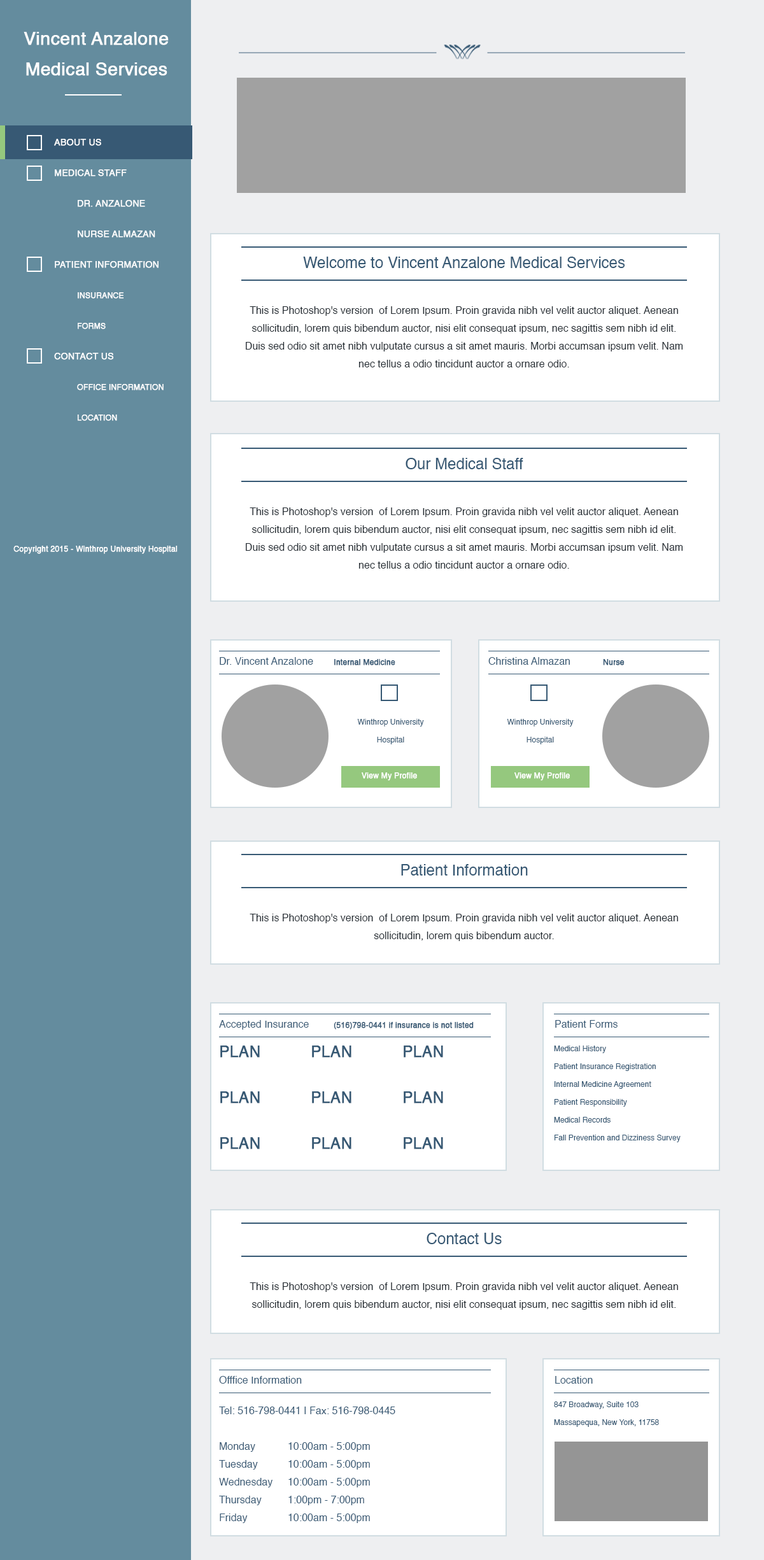
<style>
.page{position:relative;width:764px;height:1560px;background:#ffffff}
.page>*{position:absolute;margin:0}
.t1{font:17.8px/30.6px "Helvetica";color:#ffffff;font-weight:bold}
.t2{font:17.8px/22.9px "Helvetica";color:#ffffff;font-weight:bold}
.t3{font:8.9px/30.6px "Helvetica";color:#ffffff;text-transform:uppercase;font-weight:bold}
.t4{font:7.6px/30.6px "Helvetica";color:#ffffff;text-transform:uppercase;font-weight:bold}
.t5{font:15.3px "Helvetica";color:#375974}
.t6{font:10.2px/17.8px "Helvetica";color:#232b32}
.t7{font:7.6px "Helvetica";color:#ffffff;font-weight:bold}
.t8{font:10.2px "Helvetica";color:#375974}
.t9{font:7.6px "Helvetica";color:#375974;font-weight:bold}
.t10{font:7.6px/17.8px "Helvetica";color:#375974}
.t11{font:15.3px/22.9px "Helvetica";color:#375974;font-weight:bold}
.t12{font:10.2px/17.8px "Helvetica";color:#375974}
</style>
<div class="page">
<p class="t1" style="left:24px;top:32px;width:145px;height:44px;text-align:center"><span class="t2"><br></span>Vincent Anzalone<br>Medical Services</p>
<p class="t3" style="left:54px;top:139px;width:110px;height:282px">About Us<br>Medical Staff<br> Dr. Anzalone<br> Nurse Almazan<br>Patient Information<br> <span class="t4">Insurance<br> Forms<br></span>Contact Us<br> <span class="t4">Office Information<br> Location</span></p>
<p class="t5" style="left:303px;top:257px;width:322px;height:11px">Welcome to Vincent Anzalone Medical Services</p>
<p class="t6" style="left:246px;top:306px;width:437px;height:61px;text-align:center">This is Photoshop's version  of Lorem Ipsum. Proin gravida nibh vel velit auctor aliquet. Aenean sollicitudin, lorem quis bibendum auctor, nisi elit consequat ipsum, nec sagittis sem nibh id elit. Duis sed odio sit amet nibh vulputate cursus a sit amet mauris. Morbi accumsan ipsum velit. Nam nec tellus a odio tincidunt auctor a ornare odio.</p>
<p class="t5" style="left:406px;top:458px;width:117px;height:11px">Our Medical Staff</p>
<p class="t6" style="left:246px;top:508px;width:437px;height:61px;text-align:center">This is Photoshop's version  of Lorem Ipsum. Proin gravida nibh vel velit auctor aliquet. Aenean sollicitudin, lorem quis bibendum auctor, nisi elit consequat ipsum, nec sagittis sem nibh id elit. Duis sed odio sit amet nibh vulputate cursus a sit amet mauris. Morbi accumsan ipsum velit. Nam nec tellus a odio tincidunt auctor a ornare odio.</p>
<p class="t7" style="left:13px;top:546px;width:165px;height:8px">Copyright 2015 - Winthrop University Hospital</p>
<p class="t8" style="left:220px;top:657px;width:175px;height:9px">Dr. Vincent Anzalone <span class="t9">Internal Medicine</span></p>
<p class="t8" style="left:488px;top:657px;width:137px;height:9px">Christina Almazan <span class="t9"> Nurse</span></p>
<p class="t10" style="left:357px;top:719px;width:67px;height:25px;text-align:center">Winthrop University <br>Hospital</p>
<p class="t10" style="left:507px;top:719px;width:67px;height:25px;text-align:center">Winthrop University <br>Hospital</p>
<p class="t7" style="left:362px;top:773px;width:55px;height:8px">View My Profile</p>
<p class="t7" style="left:515px;top:773px;width:55px;height:8px">View My Profile</p>
<p class="t5" style="left:401px;top:864px;width:127px;height:12px">Patient Information</p>
<p class="t6" style="left:250px;top:914px;width:428px;height:27px;text-align:center">This is Photoshop's version  of Lorem Ipsum. Proin gravida nibh vel velit auctor aliquet. Aenean sollicitudin, lorem quis bibendum auctor.</p>
<p class="t9" style="left:219px;top:1020px;width:255px;height:10px"><span class="t8">Accepted Insurance  </span>(516)798-0441 if insurance is not listed</p>
<p class="t8" style="left:555px;top:1020px;width:63px;height:8px">Patient Forms</p>
<p class="t11" style="left:220px;top:1046px;width:223px;height:104px">PLAN   PLAN   PLAN <br><br>PLAN   PLAN   PLAN   <br>PLAN   PLAN   PLAN</p>
<p class="t10" style="left:554px;top:1046px;width:127px;height:97px">Medical History<br>Patient Insurance Registration<br>Internal Medicine Agreement<br>Patient Responsibility<br>Medical Records<br>Fall Prevention and Dizziness Survey</p>
<p class="t5" style="left:427px;top:1233px;width:75px;height:11px">Contact Us</p>
<p class="t6" style="left:250px;top:1283px;width:428px;height:27px;text-align:center">This is Photoshop's version  of Lorem Ipsum. Proin gravida nibh vel velit auctor aliquet. Aenean sollicitudin, lorem quis bibendum auctor, nisi elit consequat ipsum, nec sagittis sem nibh id elit.</p>
<p class="t8" style="left:219px;top:1376px;width:83px;height:8px">Offfice Information</p>
<p class="t8" style="left:555px;top:1376px;width:38px;height:8px">Location</p>
<p class="t12" style="left:219px;top:1407px;width:176px;height:116px">Tel: 516-798-0441 | Fax: 516-798-0445<br><br>Monday  10:00am - 5:00pm<br>Tuesday  10:00am - 5:00pm<br>Wednesday 10:00am - 5:00pm<br>Thursday  1:00pm - 7:00pm<br>Friday  10:00am - 5:00pm</p>
<p class="t10" style="left:554px;top:1402px;width:105px;height:25px">847 Broadway, Suite 103<br>Massapequa, New York, 11758</p>
</div>
